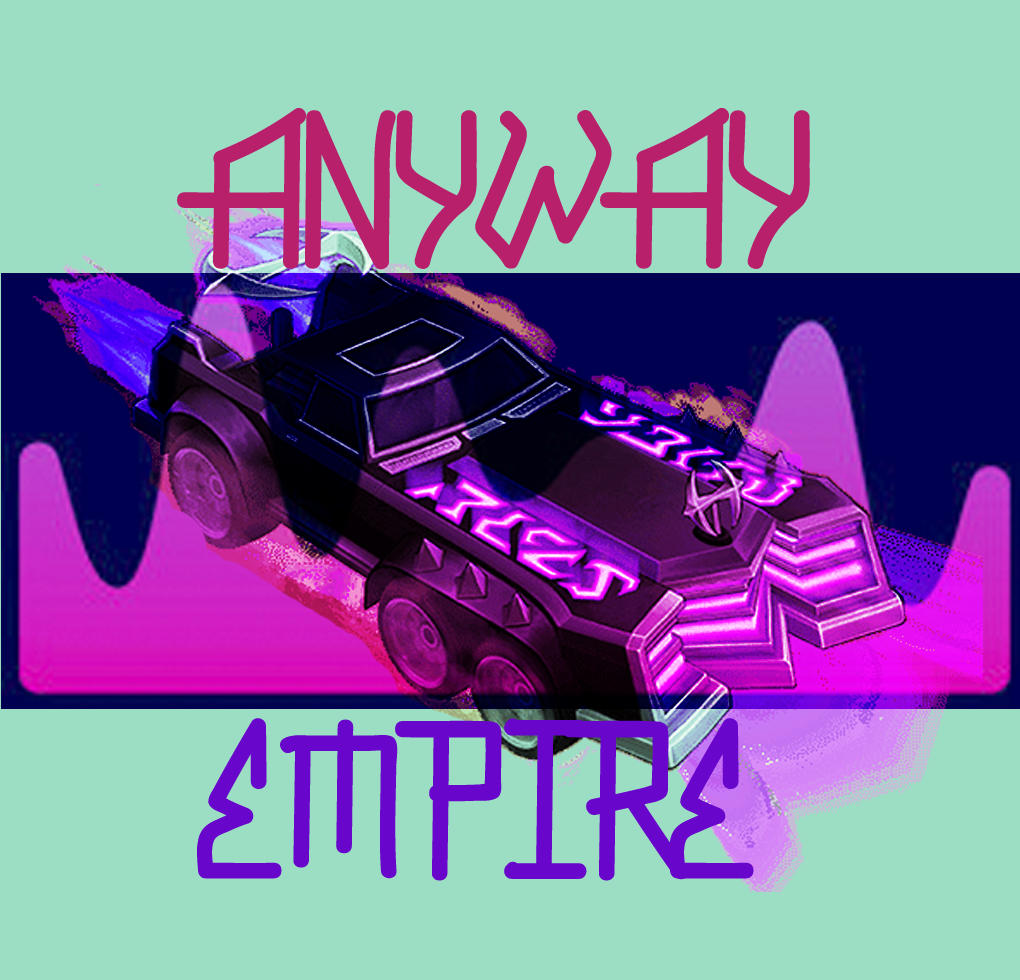
<style>
.page{position:relative;width:1020px;height:980px;background:#9cdec4}
.page>*{position:absolute;margin:0}
.t1{font:150px "GraffitiNewDemoRegular";letter-spacing:-0.025em;color:#b8206c}
.t2{font:150px "GraffitiNewDemoRegular";letter-spacing:-0.025em;color:#6807cb}
</style>
<div class="page">
<p class="t1" style="left:177px;top:108px;width:633px;height:162px">ANYWAY</p>
<p class="t2" style="left:197px;top:718px;width:557px;height:163px">EMPIRE</p>
</div>
